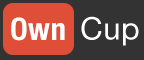
<style>
.page{position:relative;width:144px;height:60px;background:#333333}
.page>*{position:absolute;margin:0}
.t1{font:31px "HelveticaNeue-CondensedBold";letter-spacing:0.02em;color:#ffffff}
.t2{font:31px "HelveticaNeue";letter-spacing:0.02em;color:#ffffff}
</style>
<div class="page">
<p class="t1" style="left:11px;top:17px;width:54px;height:24px">Own</p>
<p class="t2" style="left:81px;top:16px;width:58px;height:30px">Cup</p>
</div>
